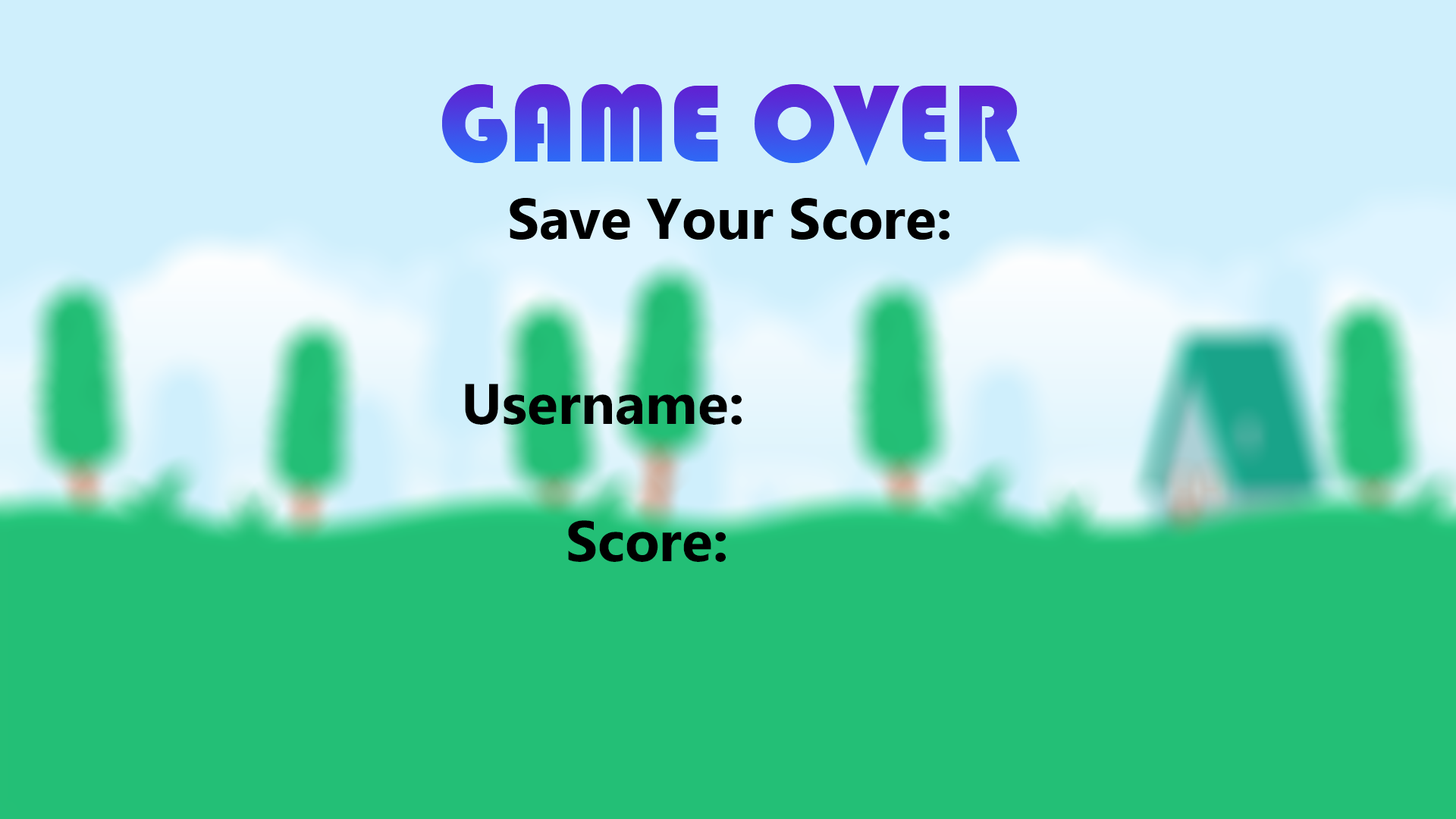
<style>
.page{position:relative;width:1456px;height:819px;background:#23bf76}
.page>*{position:absolute;margin:0}
.t1{font:56.9px "Ebrima-Bold";color:#000000}
.t2{font:57.2px "Ebrima-Bold";color:#000000}
</style>
<div class="page">
<p class="t1" style="left:510px;top:198px;width:439px;height:42px">Save Your Score:</p>
<p class="t2" style="left:465px;top:384px;width:277px;height:178px;text-align:right">Username:<br><br>Score:</p>
</div>
